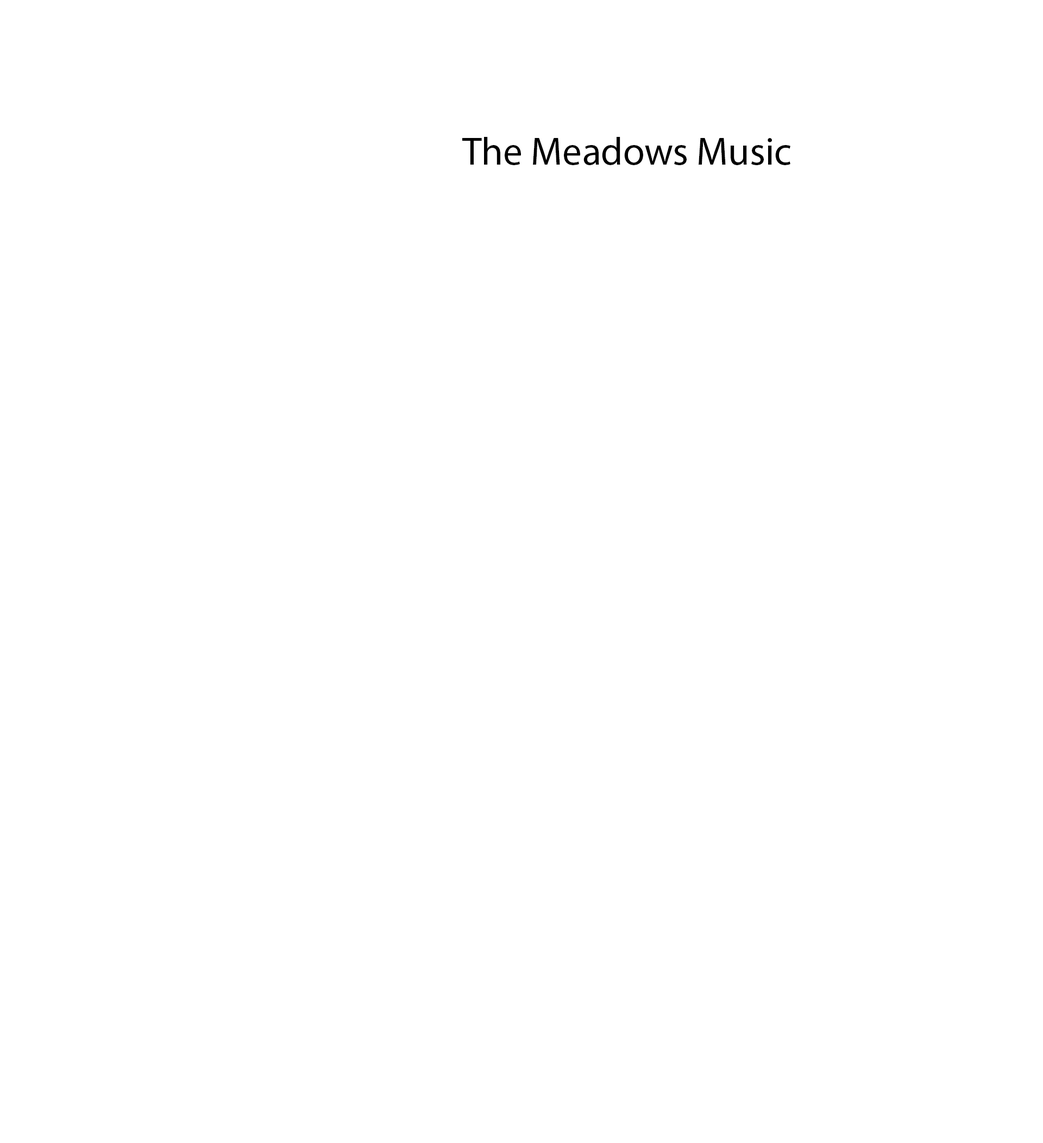
<style>
.page{position:relative;width:1043px;height:1143px;background:#ffffff}
.page>*{position:absolute;margin:0}
.t1{font:39.1px "MyriadPro-Regular";color:#000000}
</style>
<div class="page">
<p class="t1" style="left:462px;top:137px;width:329px;height:28px">The Meadows Music</p>
</div>
